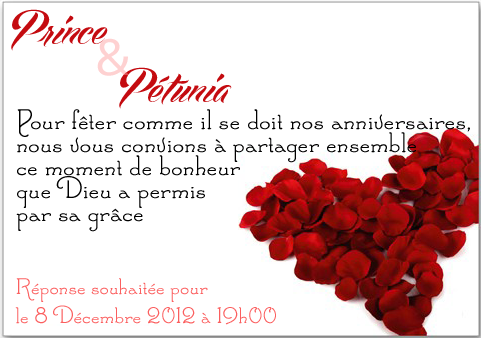
<style>
.page{position:relative;width:481px;height:338px;background:#ffffff}
.page>*{position:absolute;margin:0}
.t1{font:48.1px "EchinosParkScript-PERSONALUSEON";color:#c40b10}
.t2{font:54.5px "Corbel";color:#fed1d1}
.t3{font:30px/23px "SantasSleighFull";color:#000000}
.t4{font:24px "SantasSleighFull";color:#fb5f5f}
</style>
<div class="page">
<p class="t1" style="left:11px;top:9px;width:97px;height:42px">Prince</p>
<p class="t2" style="left:97px;top:38px;width:32px;height:38px">&amp;</p>
<p class="t1" style="left:119px;top:67px;width:113px;height:42px">Pétunia</p>
<p class="t3" style="left:16px;top:109px;width:454px;height:123px">Pour fêter comme il se doit nos anniversaires, <br>nous vous convions à partager ensemble <br>ce moment de bonheur <br>que Dieu a permis <br>par sa grâce</p>
<p class="t4" style="left:15px;top:278px;width:261px;height:47px">Réponse souhaitée pour  <br>le 8 Décembre 2012 à 19h00</p>
</div>
